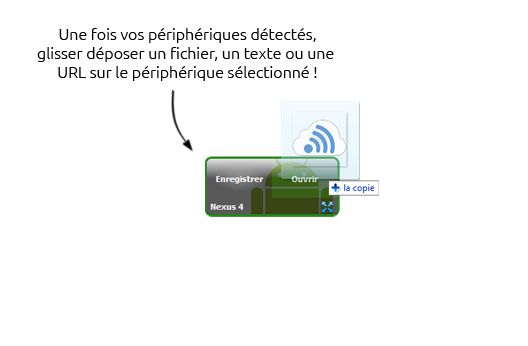
<style>
.page{position:relative;width:528px;height:346px;background:#ffffff}
.page>*{position:absolute;margin:0}
.t1{font:16px "Ubuntu-Light";color:#000000}
</style>
<div class="page">
<p class="t1" style="left:37px;top:28px;width:297px;height:53px;text-align:center">Une fois vos périphériques détectés,<br>glisser déposer un fichier, un texte ou une <br>URL sur le périphérique sélectionné !</p>
</div>
